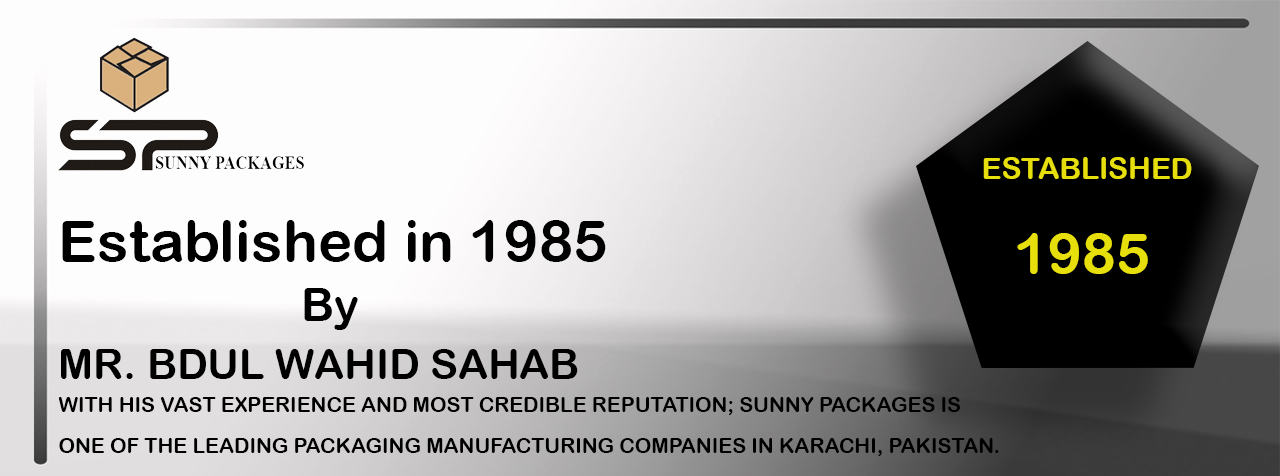
<style>
.page{position:relative;width:1280px;height:476px}
.page>*{position:absolute;margin:0}
.t1{font:29.8px "ArialRoundedMTBold";color:#e7df0c;text-transform:uppercase}
.t2{font:41.7px/58.4px "ArialRoundedMTBold";color:#000000}
.t3{font:58.4px/58.4px "ArialRoundedMTBold";color:#000000}
.t4{font:45.9px/58.4px "ArialRoundedMTBold";color:#000000}
.t5{font:57.1px "ArialRoundedMTBold";color:#e7df0c}
.t6{font:20.9px/41.7px "ArialRoundedMTBold";color:#000000;text-transform:uppercase}
</style>
<div class="page">
<p class="t1" style="left:983px;top:157px;width:209px;height:22px">Established</p>
<p class="t2" style="left:61px;top:220px;width:545px;height:159px"><span class="t3">Established in 1985 <br>                                     </span><span class="t4"> By <br></span>MR. BDUL WAHID SAHAB</p>
<p class="t5" style="left:1017px;top:233px;width:131px;height:41px">1985</p>
<p class="t6" style="left:58px;top:397px;width:941px;height:59px">with his vast experience and most credible reputation; Sunny Packages is <br>one of the leading packaging manufacturing companies in Karachi, Pakistan.</p>
</div>
